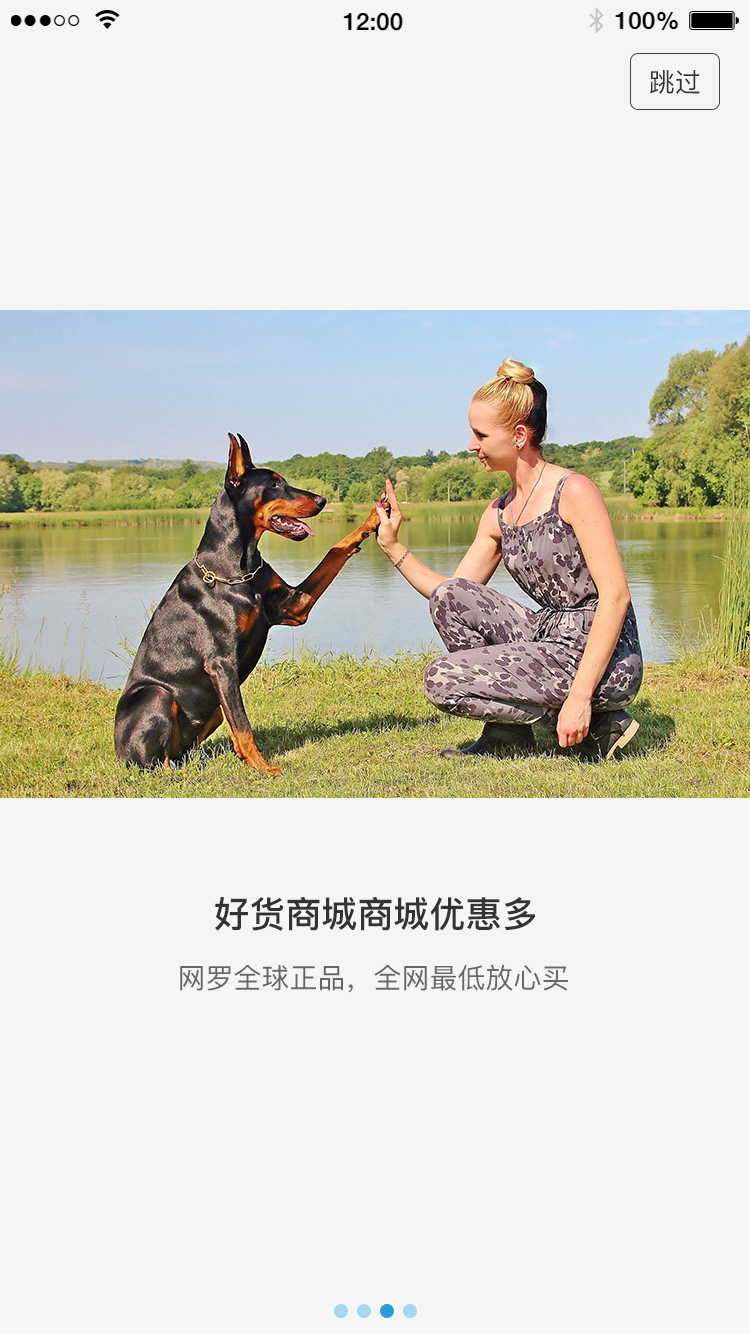
<style>
.page{position:relative;width:750px;height:1334px;background:#f5f5f5}
.page>*{position:absolute;margin:0}
.t1{font:26px "PingFangSC-Regular";color:#333333}
.t2{font:36px "PingFangSC-Medium";color:#333333}
.t3{font:28px "PingFangSC-Regular";color:#666666}
</style>
<div class="page">
<p class="t1" style="left:649px;top:70px;width:51px;height:24px">跳过</p>
<p class="t2" style="left:215px;top:896px;width:320px;height:35px">好货商城商城优惠多</p>
<p class="t3" style="left:180px;top:964px;width:388px;height:29px">网罗全球正品，全网最低放心买</p>
</div>
